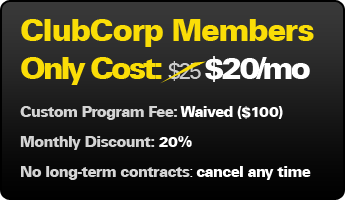
<style>
.page{position:relative;width:346px;height:201px}
.page>*{position:absolute;margin:0}
.t1{font:15px/30px "UniversLT-Black";letter-spacing:-0.05em;color:#d4d4d4}
.t2{font:31.1px "UniversLT-Black";letter-spacing:-0.05em;color:#fadd07}
.t3{font:31.1px "UniversLT-Black";letter-spacing:-0.1em;color:#fadd07}
.t4{font:23.1px "UniversLT";letter-spacing:-0.1em;color:#cccccc}
.t5{font:31.1px "UniversLT-Black";letter-spacing:-0.1em;color:#ffffff}
.t6{font:15px/38px "UniversLT-Black";letter-spacing:-0.05em;color:#d4d4d4}
.t7{font:15px/38px "UniversLT-Black";letter-spacing:-0.05em;color:#ffffff}
.t8{font:15px/30px "UniversLT-Black";letter-spacing:-0.05em;color:#ffffff}
.t9{font:15px/30px "UniversLT";letter-spacing:-0.05em;color:#ffffff}
</style>
<div class="page">
<p class="t1" style="left:20px;top:19px;width:294px;height:161px"><span class="t2">ClubCorp Members </span><span class="t3">Only Cost: </span><span class="t4">$25 </span><span class="t5">$20/mo<br></span><span class="t6">Custom Program Fee:</span><span class="t7"> Waived ($100) <br></span>Monthly Discount: <span class="t8">20%<br></span>No long-term contracts<span class="t9">: </span><span class="t8">cancel any time</span></p>
</div>
